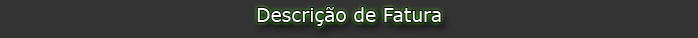
<style>
.page{position:relative;width:698px;height:38px;background:#333333}
.page>*{position:absolute;margin:0}
.t1{font:18.8px "Verdana";color:#ffffff}
</style>
<div class="page">
<p class="t1" style="left:257px;top:7px;width:184px;height:19px">Descrição de Fatura</p>
</div>
